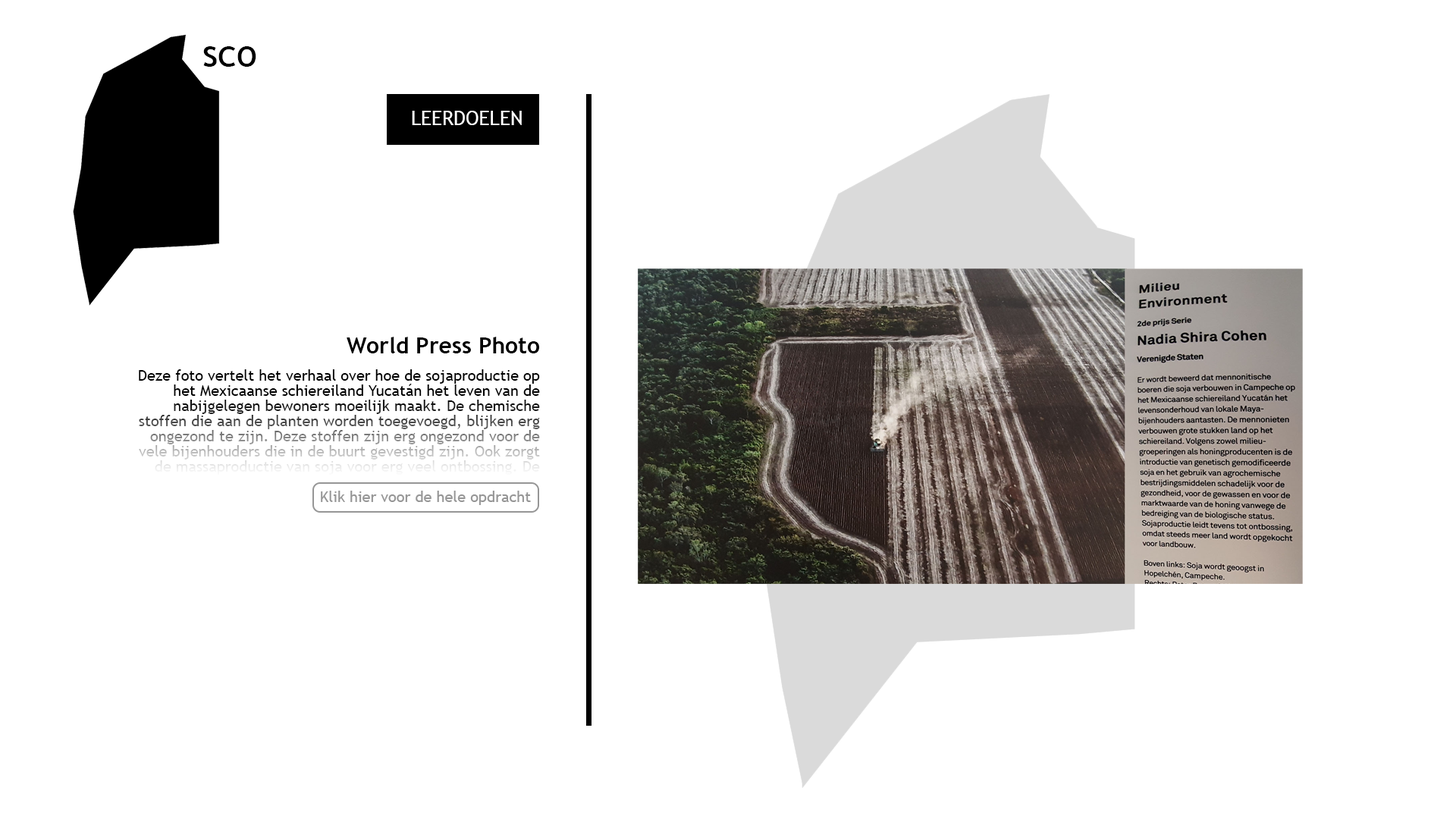
<style>
.page{position:relative;width:1456px;height:819px;background:#ffffff}
.page>*{position:absolute;margin:0}
.t1{font:37.9px "TrebuchetMS";color:#000000}
.t2{font:19.8px "TrebuchetMS";color:#ffffff}
.t3{font:22.7px "TrebuchetMS-Bold";color:#000000}
.t4{font:15.2px/15.2px "TrebuchetMS"}
.t5{font:15.2px "TrebuchetMS";color:#969696}
</style>
<div class="page">
<p class="t1" style="left:203px;top:46px;width:53px;height:21px">sco</p>
<p class="t2" style="left:412px;top:111px;width:110px;height:14px">LEERDOELEN</p>
<p class="t3" style="left:347px;top:337px;width:192px;height:16px">World Press Photo</p>
<p class="t4" style="left:139px;top:369px;width:401px;height:106px;text-align:right">Deze foto vertelt het verhaal over hoe de sojaproductie op het Mexicaanse schiereiland Yucatán het leven van de nabijgelegen bewoners moeilijk maakt. De chemische stoffen die aan de planten worden toegevoegd, blijken erg ongezond te zijn. Deze stoffen zijn erg ongezond voor de vele bijenhouders die in de buurt gevestigd zijn. Ook zorgt de massaproductie van soja voor erg veel ontbossing. De fotograaf laat met deze foto de problemen zien die zich in Yucatán voor doen.</p>
<p class="t5" style="left:321px;top:491px;width:210px;height:14px">Klik hier voor de hele opdracht</p>
</div>
